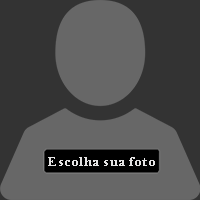
<style>
.page{position:relative;width:200px;height:200px;background:#676767}
.page>*{position:absolute;margin:0}
.t1{font:14px "BellMTBold";letter-spacing:0.05em;color:#e5e4e4}
</style>
<div class="page">
<p class="t1" style="left:48px;top:157px;width:107px;height:9px">Escolha sua foto</p>
</div>
